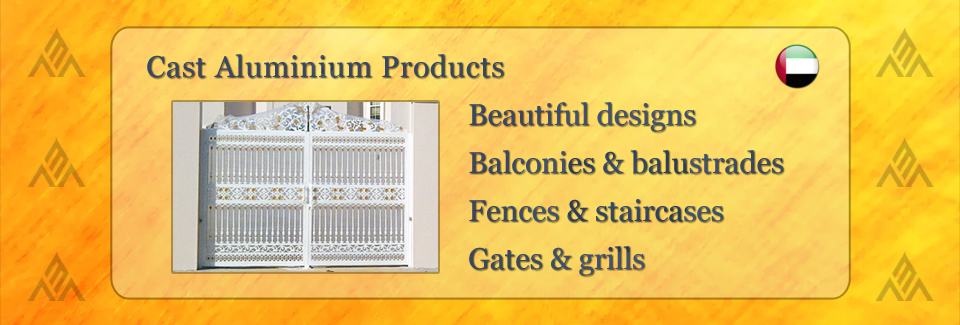
<style>
.page{position:relative;width:960px;height:325px}
.page>*{position:absolute;margin:0}
.t1{font:30px "Georgia";letter-spacing:0.025em;color:#364866}
.t2{font:30px/48px "Georgia";color:#37496a}
</style>
<div class="page">
<p class="t1" style="left:147px;top:54px;width:357px;height:24px">Cast Aluminium Products</p>
<p class="t2" style="left:469px;top:102px;width:314px;height:174px">Beautiful designs<br>Balconies &amp; balustrades<br>Fences &amp; staircases<br>Gates &amp; grills</p>
</div>
